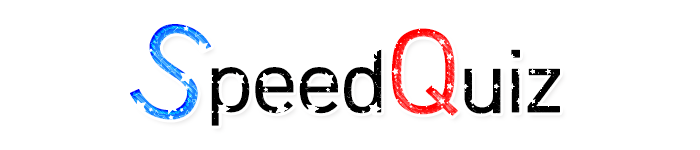
<style>
.page{position:relative;width:700px;height:150px;background:#ffffff}
.page>*{position:absolute;margin:0}
.t1{font:125px "HCRDotum";letter-spacing:-0.07em;font-weight:bold}
.t2{font:85px "HCRDotum";letter-spacing:-0.07em;font-weight:bold}
.t3{font:112px "HCRDotum";letter-spacing:-0.07em;font-weight:bold}
.t4{font:85px "HCRDotum";letter-spacing:-0.07em;color:#000000;font-weight:bold}
</style>
<div class="page">
<p class="t1" style="left:130px;top:24px;width:81px;height:96px;rotate:19deg">S</p>
<p class="t2" style="left:391px;top:28px;width:169px;height:89px"><span class="t3">Q</span>uiz</p>
<p class="t4" style="left:211px;top:49px;width:171px;height:77px">peed</p>
</div>
